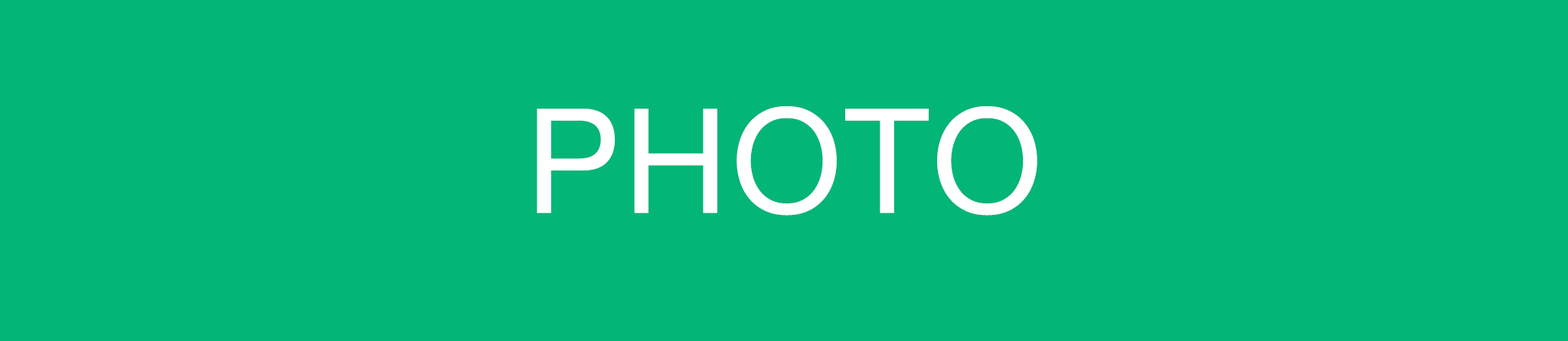
<style>
.page{position:relative;width:1568px;height:341px;background:#03b577}
.page>*{position:absolute;margin:0}
.t1{font:145.9px "HelveticaNeue";letter-spacing:0.02em;color:#ffffff}
</style>
<div class="page">
<p class="t1" style="left:537px;top:106px;width:500px;height:110px">PHOTO</p>
</div>
